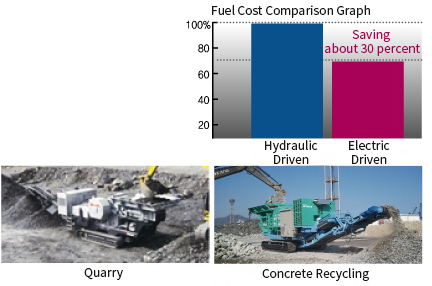
<style>
.page{position:relative;width:432px;height:286px;background:#ffffff}
.page>*{position:absolute;margin:0}
.t1{font:12px "NotoSansCJKkr-Regular";color:#161616}
.t2{font:12px "NotoSansCJKkr-Regular";color:#a80258}
</style>
<div class="page">
<p class="t1" style="left:212px;top:5px;width:158px;height:13px">Fuel Cost Comparison Graph</p>
<p class="t2" style="left:325px;top:29px;width:95px;height:27px;text-align:center">Saving <br>about 30 percent</p>
<p class="t1" style="left:265px;top:140px;width:53px;height:24px;text-align:center">Hydraulic<br>Driven</p>
<p class="t1" style="left:349px;top:140px;width:41px;height:24px;text-align:center">Electric<br>Driven</p>
<p class="t1" style="left:84px;top:268px;width:39px;height:12px">Quarry</p>
<p class="t1" style="left:262px;top:268px;width:107px;height:13px">Concrete Recycling</p>
</div>
